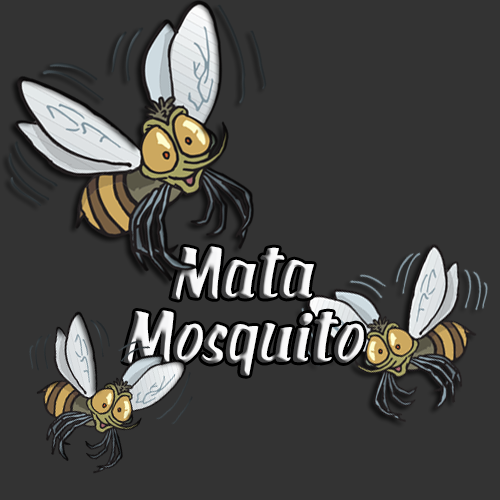
<style>
.page{position:relative;width:500px;height:500px;background:#333333}
.page>*{position:absolute;margin:0}
.t1{font:53.6px "SilverAgeQueens";scale:1.15 1}
</style>
<div class="page">
<p class="t1" style="left:123px;top:246px;width:241px;height:130px;text-align:center">Mata<br>Mosquito</p>
</div>
